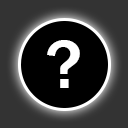
<style>
.page{position:relative;width:128px;height:128px;background:#333333}
.page>*{position:absolute;margin:0}
.t1{font:72px "FranklinGothic-Medium";color:#ffffff}
</style>
<div class="page">
<p class="t1" style="left:47px;top:40px;width:33px;height:48px">?</p>
</div>
